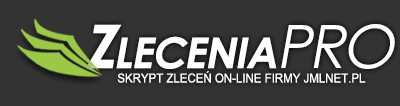
<style>
.page{position:relative;width:400px;height:106px;background:#333333}
.page>*{position:absolute;margin:0}
.t1{font:60px "CenturyGothic-Bold";letter-spacing:-0.05em;color:#ffffff;font-variant:small-caps;font-weight:bold;font-style:italic}
.t2{font:60px "CenturyGothic";letter-spacing:-0.05em;color:#ffffff;font-variant:small-caps;font-style:italic}
.t3{font:12.6px "ArialNarrow";color:#ffffff;text-transform:uppercase;scale:1.11 1}
</style>
<div class="page">
<p class="t1" style="left:86px;top:24px;width:309px;height:45px">Zlecenia<span class="t2">PRO</span></p>
<p class="t3" style="left:117px;top:71px;width:249px;height:12px">skrypt zleceń on-line firmy JMLnet.pl</p>
</div>
